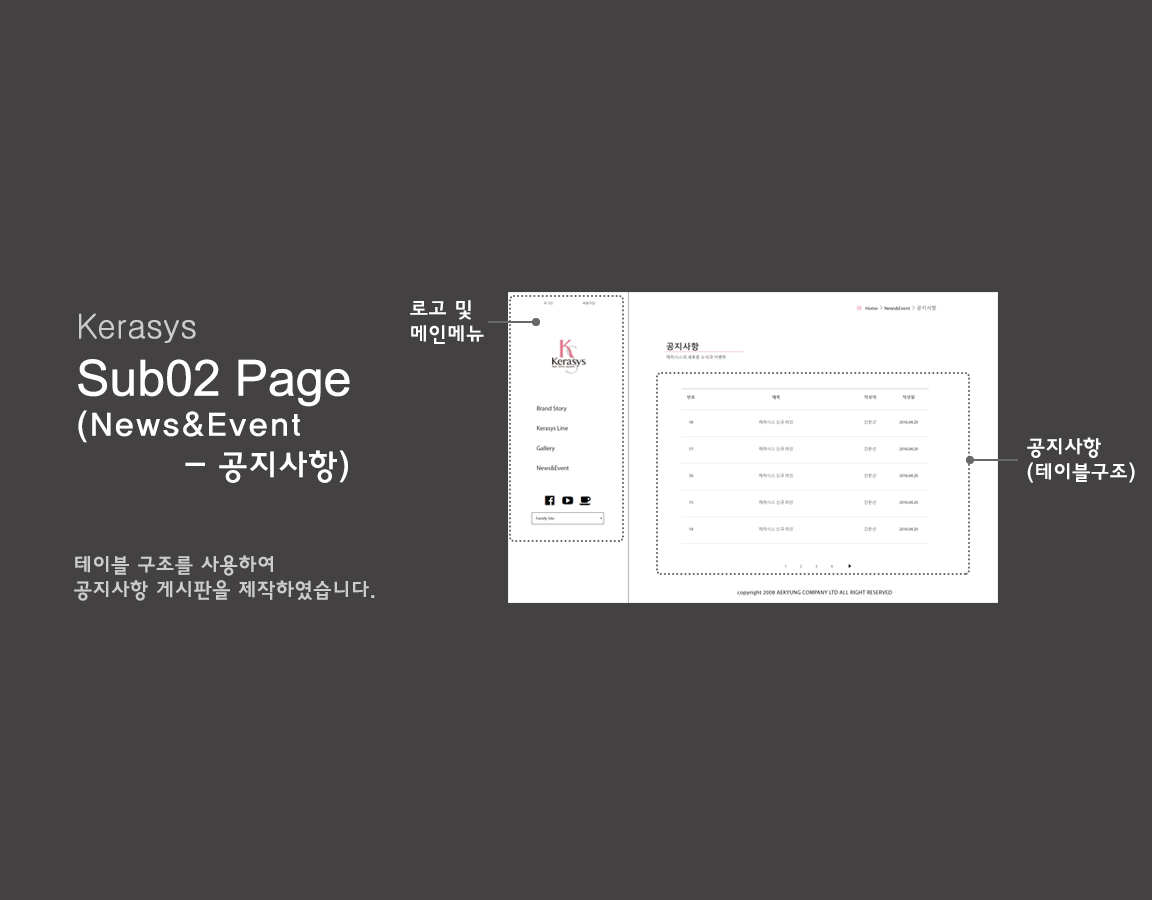
<style>
.page{position:relative;width:1152px;height:900px;background:#434141}
.page>*{position:absolute;margin:0}
.t1{font:20.8px "HaanYGodic23";color:#ffffff}
.t2{font:33.3px "Gulim";color:#cccccc}
.t3{font:33.3px "HaanYGodic23";color:#ffffff}
.t4{font:50px "ArialMT";color:#ffffff}
.t5{font:20.8px "HaanYGodic23";color:#cccccc}
</style>
<div class="page">
<p class="t1" style="left:410px;top:300px;width:74px;height:44px;text-align:justify">로고 및<br>메인메뉴</p>
<p class="t2" style="left:79px;top:313px;width:117px;height:30px">Kerasys</p>
<p class="t3" style="left:78px;top:359px;width:272px;height:124px;text-align:justify"><span class="t4">Sub02 Page<br></span>(News&amp;Event<br>   - 공지사항)</p>
<p class="t1" style="left:1027px;top:437px;width:108px;height:46px;text-align:justify">공지사항<br>(테이블구조)</p>
<p class="t5" style="left:74px;top:555px;width:301px;height:46px;text-align:justify">테이블 구조를 사용하여<br>공지사항 게시판을 제작하였습니다.</p>
</div>
